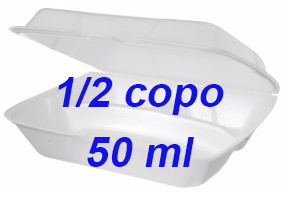
<style>
.page{position:relative;width:284px;height:204px;background:#fefefe}
.page>*{position:absolute;margin:0}
.t1{font:72px "Arial-BoldMT";color:#1111ea;font-style:italic}
</style>
<div class="page">
<p class="t1" style="left:58px;top:77px;width:166px;height:38px">1/2 copo</p>
<p class="t1" style="left:87px;top:137px;width:107px;height:30px">50 ml</p>
</div>
